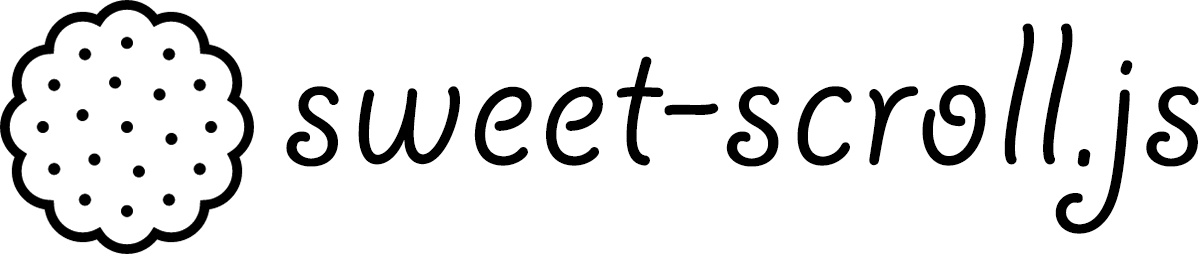
<style>
.page{position:relative;width:1200px;height:254px;background:#ffffff}
.page>*{position:absolute;margin:0}
.t1{font:225px "GiddyupStd";letter-spacing:0.025em;color:#000000}
</style>
<div class="page">
<p class="t1" style="left:286px;top:23px;width:913px;height:211px">sweet-scroll.js</p>
</div>
